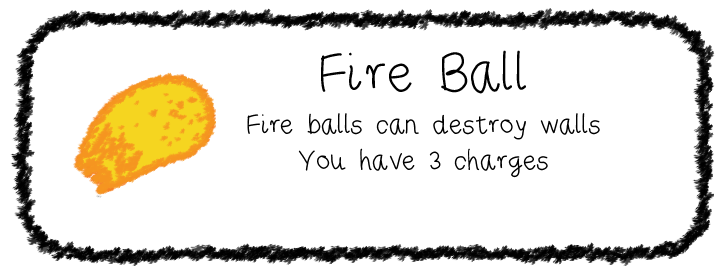
<style>
.page{position:relative;width:725px;height:274px;background:#ffffff}
.page>*{position:absolute;margin:0}
.t1{font:60px "RiseStarHand";color:#000000}
.t2{font:30px "RiseStarHand";color:#000000}
</style>
<div class="page">
<p class="t1" style="left:321px;top:50px;width:205px;height:44px">Fire Ball</p>
<p class="t2" style="left:247px;top:113px;width:353px;height:65px;text-align:center">Fire balls can destroy walls<br>You have 3 charges</p>
</div>
